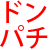
<style>
.page{position:relative;width:50px;height:50px;background:#ffffff}
.page>*{position:absolute;margin:0}
.t1{font:25px "KozGoPr6N-Medium";color:#fe0000}
</style>
<div class="page">
<p class="t1" style="left:6px;top:0px;width:41px;height:23px">ドン</p>
<p class="t1" style="left:0px;top:25px;width:48px;height:24px">パチ</p>
</div>
